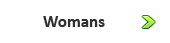
<style>
.page{position:relative;width:170px;height:43px;background:#ffffff}
.page>*{position:absolute;margin:0}
.t1{font:17px "Calibri-Bold";color:#2f2f2f}
</style>
<div class="page">
<p class="t1" style="left:43px;top:16px;width:62px;height:11px">Womans</p>
</div>
